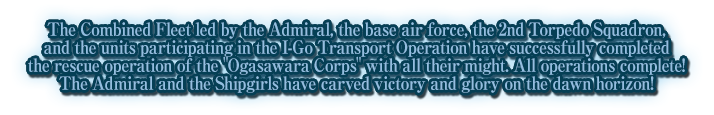
<style>
.page{position:relative;width:714px;height:115px;background:#053f55}
.page>*{position:absolute;margin:0}
.t1{font:18px/18px "RyuminPro-ExBold";letter-spacing:-0.04em;color:#93bee0;scale:0.9 1}
</style>
<div class="page">
<p class="t1" style="left:28px;top:22px;width:657px;height:71px;text-align:center">The Combined Fleet led by the Admiral, the base air force, the 2nd Torpedo Squadron,<br>and the units participating in the I-Go Transport Operation have successfully completed<br>the rescue operation of the "Ogasawara Corps" with all their might. All operations complete!<br>The Admiral and the Shipgirls have carved victory and glory on the dawn horizon!</p>
</div>
